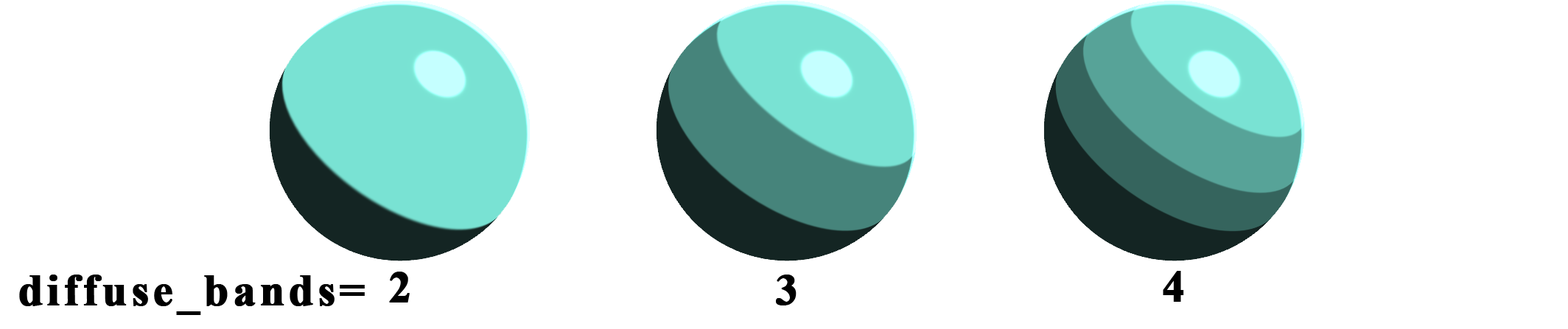
<style>
.page{position:relative;width:1568px;height:329px;background:#ffffff}
.page>*{position:absolute;margin:0}
.t1{font:44.2px "TimesNewRomanPS-BoldMT";letter-spacing:0.075em;color:#000000;font-weight:bold}
</style>
<div class="page">
<p class="t1" style="left:19px;top:275px;width:346px;height:40px">diffuse_bands=</p>
<p class="t1" style="left:389px;top:272px;width:21px;height:31px">2</p>
<p class="t1" style="left:776px;top:275px;width:21px;height:31px">3</p>
<p class="t1" style="left:1163px;top:271px;width:21px;height:31px">4</p>
</div>
